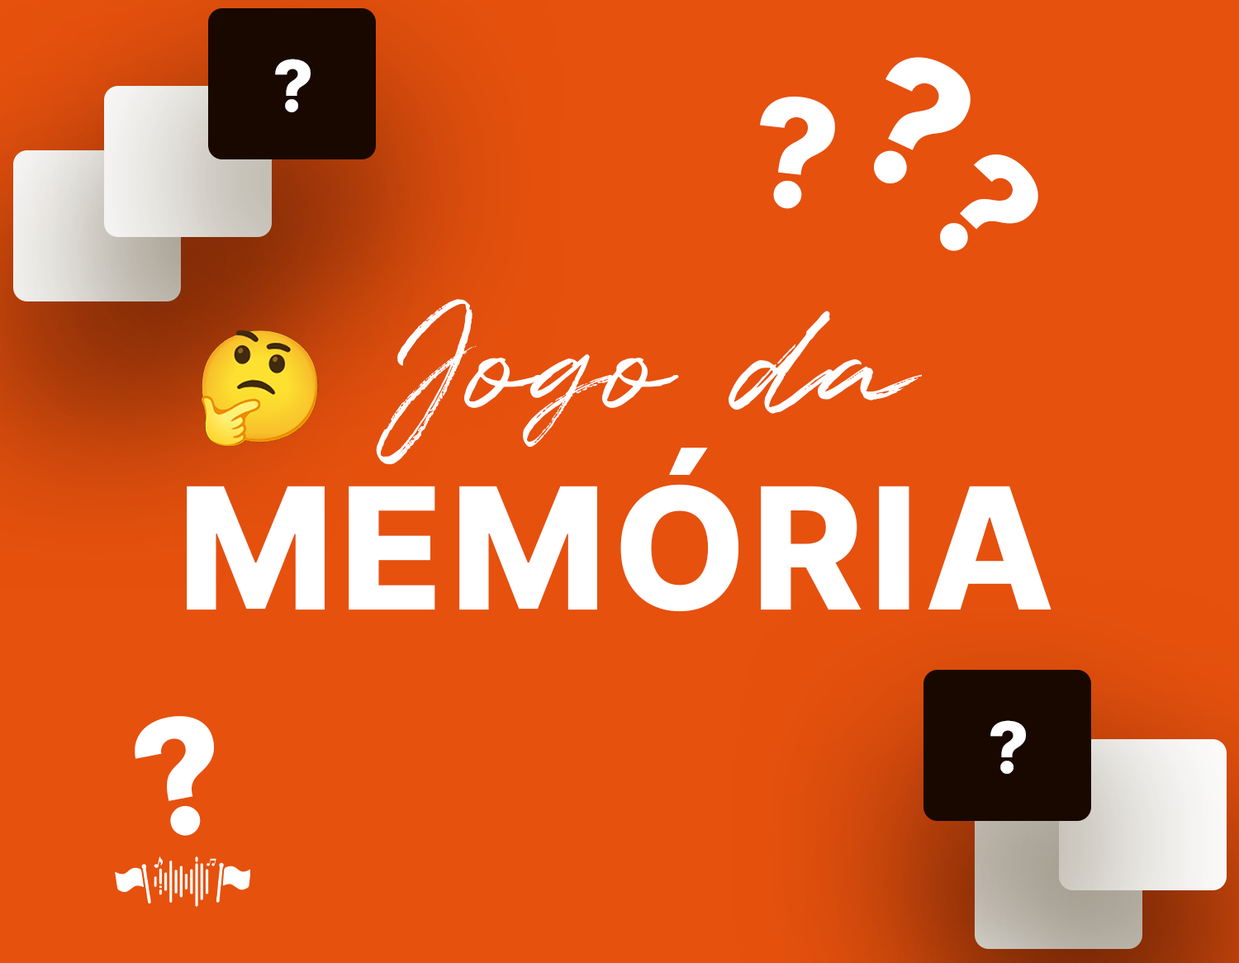
<style>
.page{position:relative;width:1239px;height:963px;background:#e6510d}
.page>*{position:absolute;margin:0}
.t1{font:70.8px "Inter-ExtraBold";letter-spacing:0.4em;color:#ffffff;text-transform:uppercase}
.t2{font:177px "Inter-ExtraBold";letter-spacing:0.4em;color:#ffffff;text-transform:uppercase}
.t3{font:150.2px "Inter-ExtraBold";letter-spacing:0.4em;color:#ffffff;text-transform:uppercase}
.t4{font:151.1px "Quentin";letter-spacing:0.025em;color:#ffffff}
.t5{font:169px "Inter-ExtraBold";letter-spacing:0.025em;color:#ffffff;text-transform:uppercase}
.t6{font:159.7px "Inter-ExtraBold";letter-spacing:0.4em;color:#ffffff;text-transform:uppercase}
</style>
<div class="page">
<p class="t1" style="left:275px;top:59px;width:35px;height:53px">?</p>
<p class="t2" style="left:874px;top:57px;width:96px;height:127px;rotate:25deg">?</p>
<p class="t3" style="left:760px;top:96px;width:75px;height:113px;rotate:6deg">?</p>
<p class="t3" style="left:940px;top:154px;width:98px;height:97px;rotate:43deg">?</p>
<p class="t4" style="left:376px;top:299px;width:546px;height:166px">Jogo da</p>
<p class="t5" style="left:187px;top:448px;width:864px;height:164px">memória</p>
<p class="t6" style="left:135px;top:716px;width:80px;height:120px;rotate:-11deg">?</p>
<p class="t1" style="left:990px;top:720px;width:36px;height:54px">?</p>
</div>
